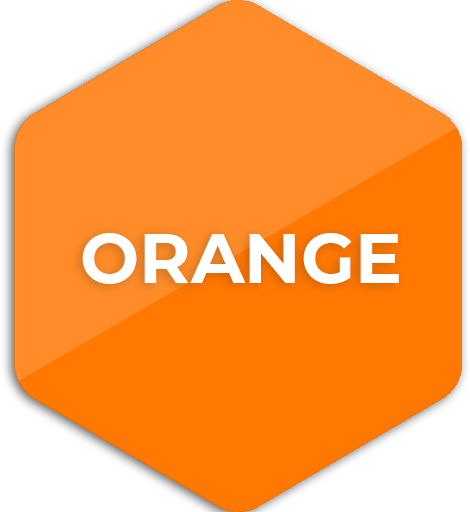
<style>
.page{position:relative;width:470px;height:512px;background:#ff8c28}
.page>*{position:absolute;margin:0}
.t1{font:70px "Montserrat-Bold";color:#ffffff}
</style>
<div class="page">
<p class="t1" style="left:82px;top:233px;width:317px;height:51px">ORANGE</p>
</div>
